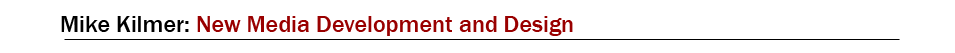
<style>
.page{position:relative;width:955px;height:53px;background:#ffffff}
.page>*{position:absolute;margin:0}
.t1{font:24px "FranklinGothic-Medium";color:#990000}
.t2{font:24px "FranklinGothic-Medium";color:#000000}
</style>
<div class="page">
<p class="t1" style="left:61px;top:16px;width:512px;height:20px"><span class="t2">Mike Kilmer: </span>New Media Development and Design</p>
</div>
